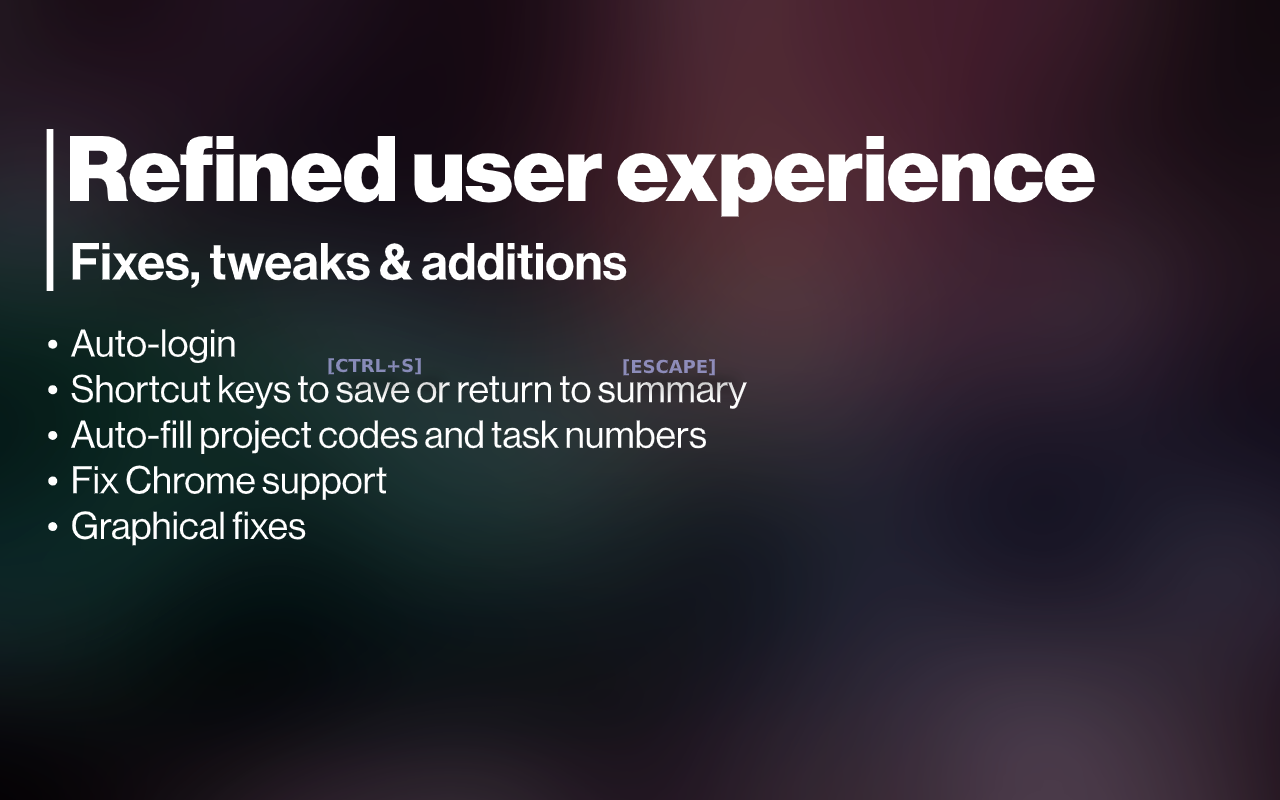
<style>
.page{position:relative;width:1280px;height:800px}
.page>*{position:absolute;margin:0}
.t1{font:91px "NeueHaasDisplay-Black";color:#ffffff}
.t2{font:51px "NeueHaasDisplay-Mediu";color:#ffffff}
.t3{font:38px "NeueHaasDisplay-Roman";color:#ffffff}
.t4{font:18px "NeueHaasDisplay-Black";color:#888bb8}
.t5{font:18px "NeueHaasDisplay-Black";color:#8d8cb9}
</style>
<div class="page">
<p class="t1" style="left:69px;top:134px;width:1027px;height:83px">Refined user experience</p>
<p class="t2" style="left:72px;top:243px;width:555px;height:46px">Fixes, tweaks &amp; additions</p>
<p class="t3" style="left:48px;top:329px;width:699px;height:217px">•  Auto-login<br>•  Shortcut keys to save or return to summary<br>•  Auto-fill project codes and task numbers<br>•  Fix Chrome support<br>•  Graphical fixes</p>
<p class="t4" style="left:328px;top:358px;width:93px;height:17px">[CTRL+S]</p>
<p class="t5" style="left:623px;top:359px;width:92px;height:17px">[ESCAPE]</p>
</div>
